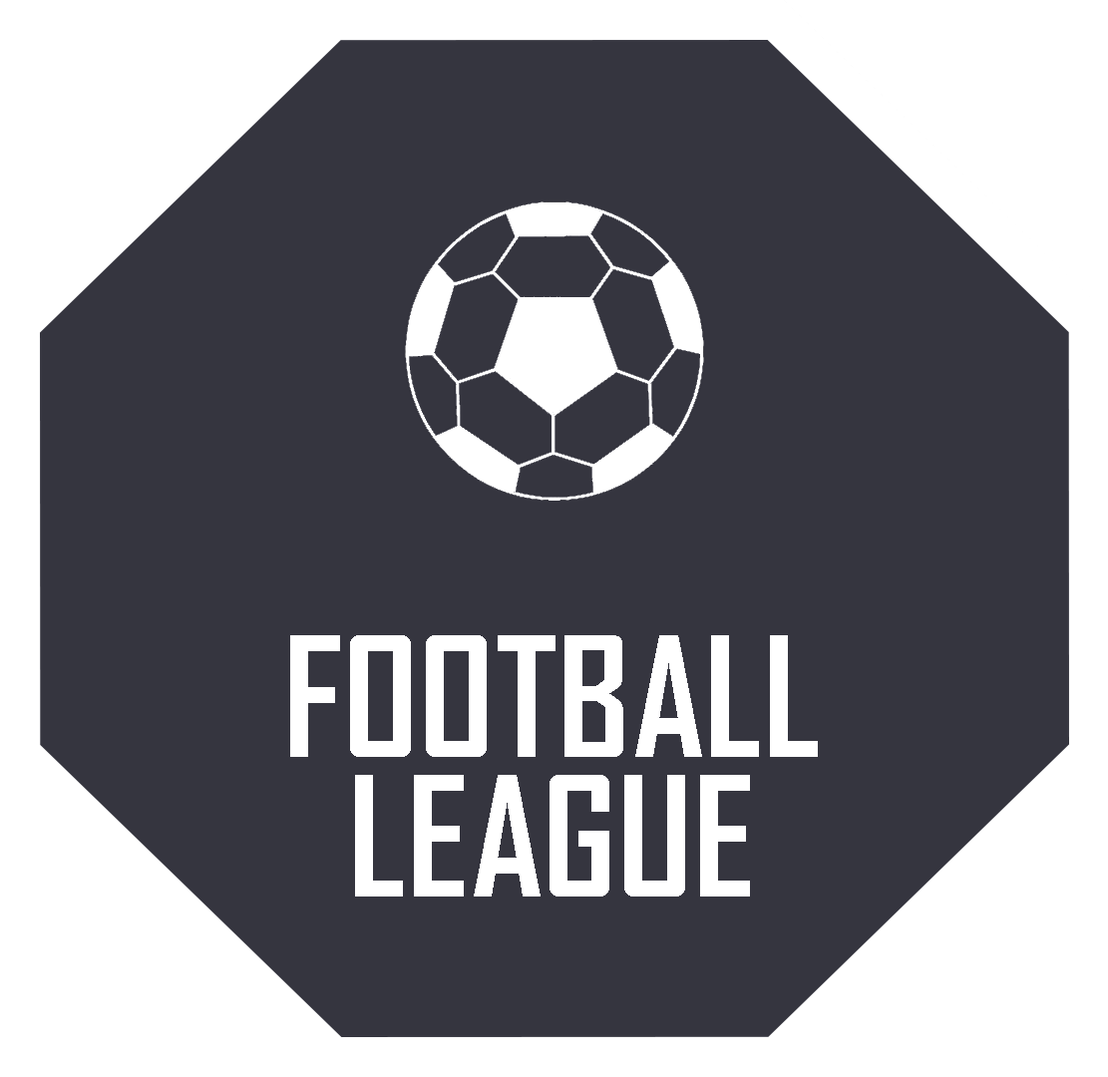
<style>
.page{position:relative;width:1108px;height:1077px;background:#35353f}
.page>*{position:absolute;margin:0}
.t1{font:159.5px/139.6px "AgencyFB-Bold";color:#ffffff}
</style>
<div class="page">
<p class="t1" style="left:290px;top:635px;width:527px;height:261px;text-align:center">FOOTBALL<br>LEAGUE</p>
</div>
